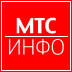
<style>
.page{position:relative;width:72px;height:72px;background:#ff0000}
.page>*{position:absolute;margin:0}
.t1{font:20.8px "TruthCYR-Medium";color:#ffffff}
.t2{font:20.8px "TruthCYR-Light";color:#ffffff}
</style>
<div class="page">
<p class="t1" style="left:16px;top:17px;width:40px;height:17px">МТС</p>
<p class="t2" style="left:9px;top:39px;width:55px;height:16px">ИНФО</p>
</div>
